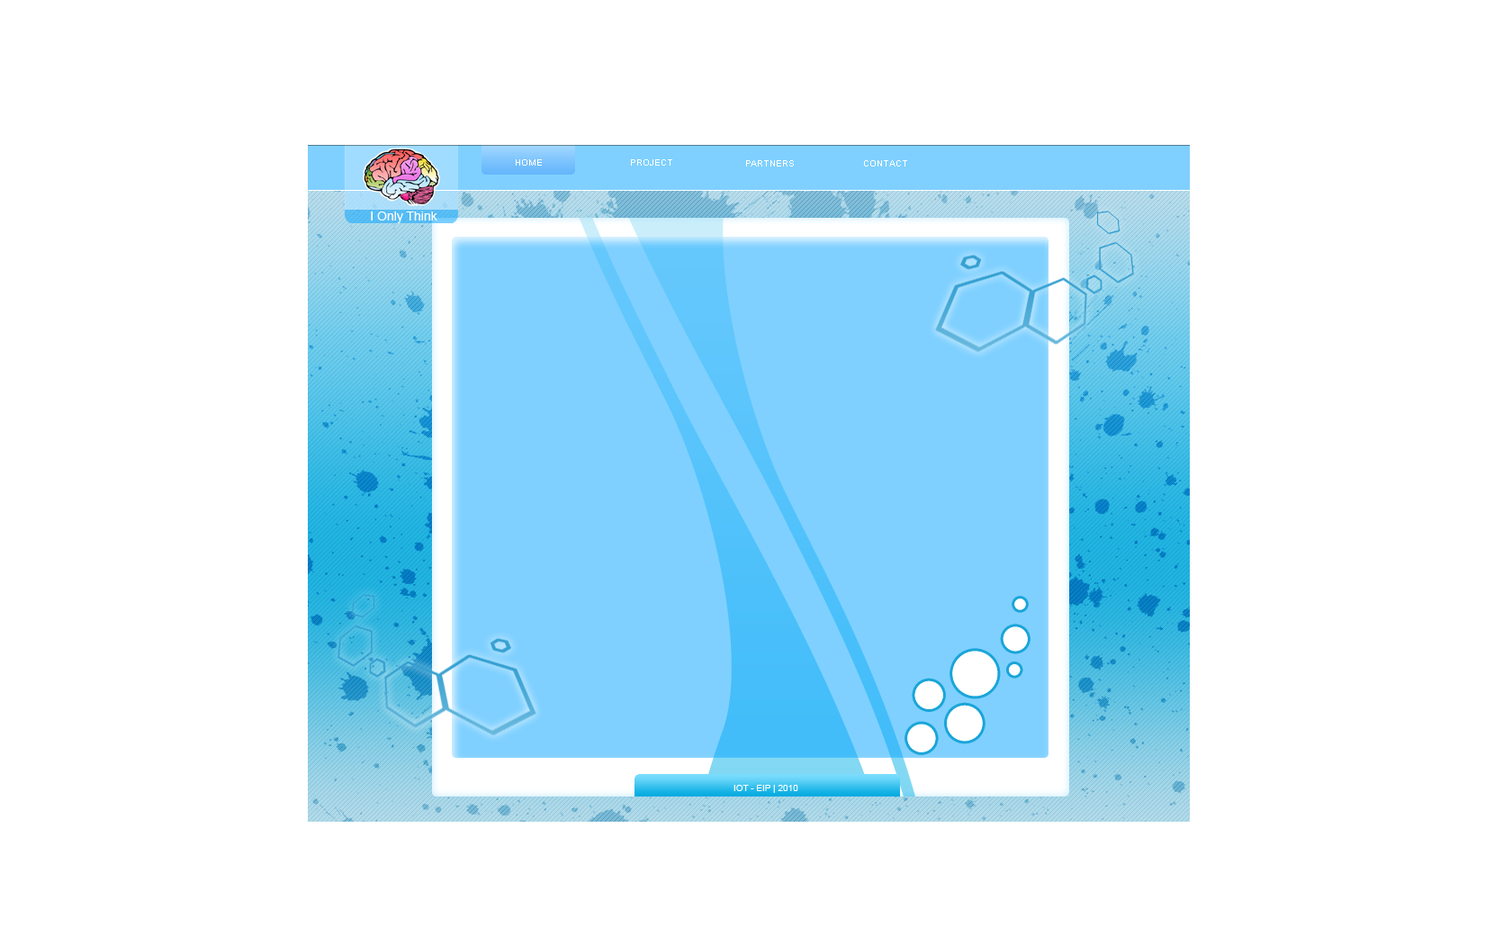
<style>
.page{position:relative;width:1512px;height:945px;background:#ffffff}
.page>*{position:absolute;margin:0}
.t1{font:9px "ArialMT";color:#ffffff}
.t2{font:12.6px "ArialMT";color:#ffffff}
</style>
<div class="page">
<p class="t1" style="left:516px;top:159px;width:26px;height:7px">HOME</p>
<p class="t1" style="left:631px;top:159px;width:41px;height:7px">PROJECT</p>
<p class="t1" style="left:746px;top:160px;width:48px;height:6px">PARTNERS</p>
<p class="t1" style="left:864px;top:160px;width:43px;height:6px">CONTACT</p>
<p class="t2" style="left:371px;top:212px;width:66px;height:11px">I Only Think</p>
<p class="t1" style="left:734px;top:785px;width:64px;height:8px">IOT - EIP | 2010</p>
</div>
